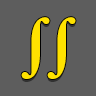
<style>
.page{position:relative;width:96px;height:96px;background:#5d5d5d}
.page>*{position:absolute;margin:0}
.t1{font:64px "BergamoPro-Bold";color:#ffe200}
</style>
<div class="page">
<p class="t1" style="left:21px;top:17px;width:55px;height:62px">∫∫</p>
</div>
